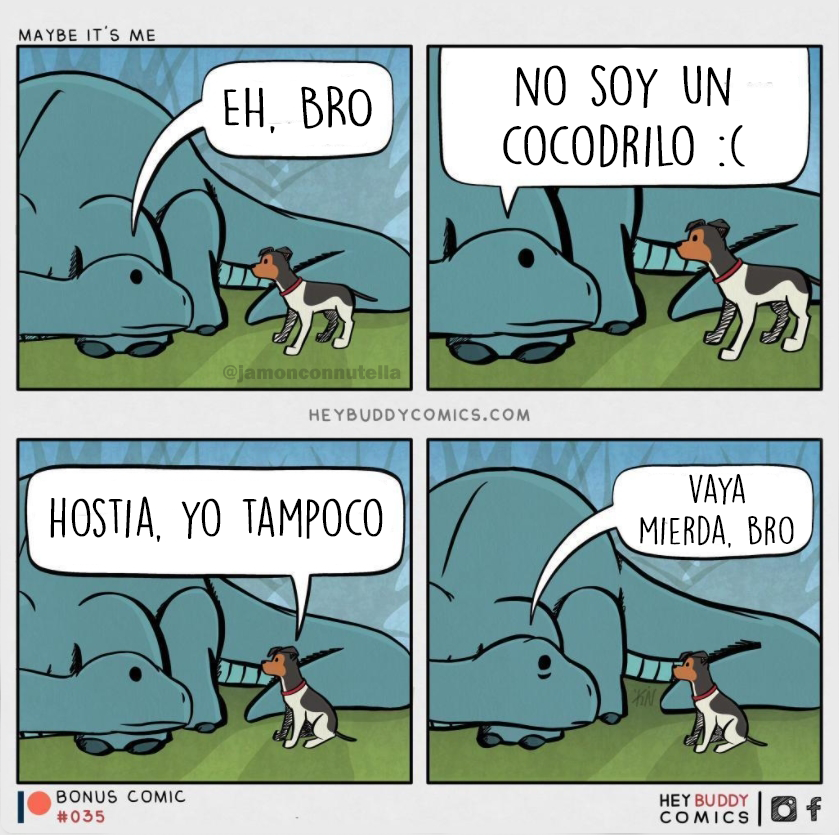
<style>
.page{position:relative;width:839px;height:835px}
.page>*{position:absolute;margin:0}
.t1{font:51.4px "DKLemonYellowSun";color:#000000;scale:1.25 1}
.t2{font:51.2px "DKLemonYellowSun";color:#000000;scale:1.3 1}
.t3{font:20.6px "FranklinGothic-Heavy";color:#61773d}
.t4{font:35.3px "DKLemonYellowSun";color:#000000;scale:1.22 1}
.t5{font:48.8px "DKLemonYellowSun";color:#000000;scale:1.13 1}
</style>
<div class="page">
<p class="t1" style="left:503px;top:65px;width:242px;height:103px;text-align:center">no soy un<br>cocodrilo :(</p>
<p class="t2" style="left:224px;top:86px;width:148px;height:48px">EH, BRO</p>
<p class="t3" style="left:223px;top:365px;width:178px;height:18px">@jamonconnutella</p>
<p class="t4" style="left:640px;top:474px;width:154px;height:74px;text-align:center">vaya<br>mierda, bro</p>
<p class="t5" style="left:50px;top:496px;width:333px;height:46px">hostia, yo tampoco</p>
</div>
